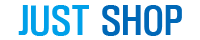
<style>
.page{position:relative;width:200px;height:40px;background:#ffffff}
.page>*{position:absolute;margin:0}
.t1{font:35px "H2hdrM";color:#00a0e9}
.t2{font:35px "H2hdrM";color:#0068b7}
</style>
<div class="page">
<p class="t1" style="left:18px;top:5px;width:164px;height:31px">JUST <span class="t2">SHOP</span></p>
</div>
